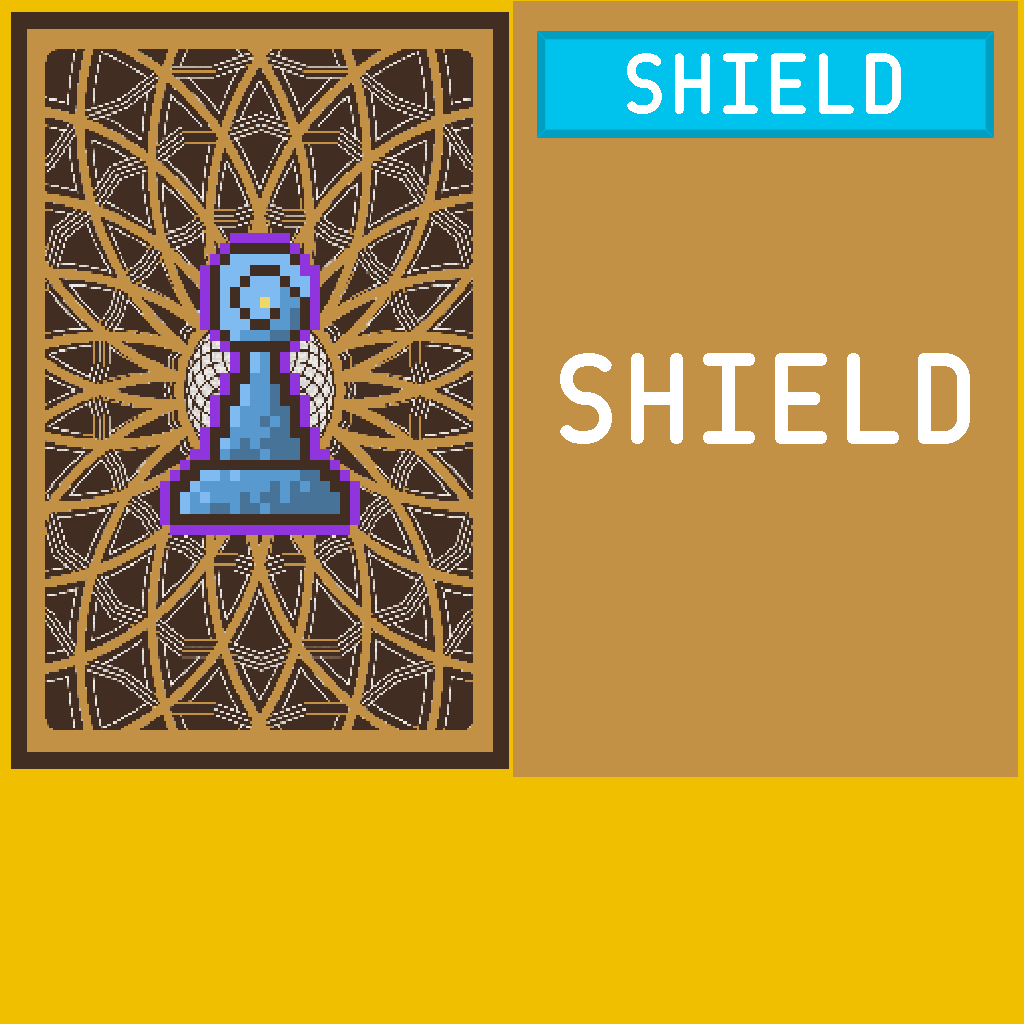
<style>
.page{position:relative;width:1024px;height:1024px;background:#c39146}
.page>*{position:absolute;margin:0}
.t1{font:88.9px "CQMono";letter-spacing:0.05em;color:#ffffff}
.t2{font:133.3px "CQMono";letter-spacing:0.05em;color:#ffffff}
</style>
<div class="page">
<p class="t1" style="left:627px;top:53px;width:274px;height:61px">SHIELD</p>
<p class="t2" style="left:560px;top:353px;width:410px;height:91px">SHIELD</p>
</div>
